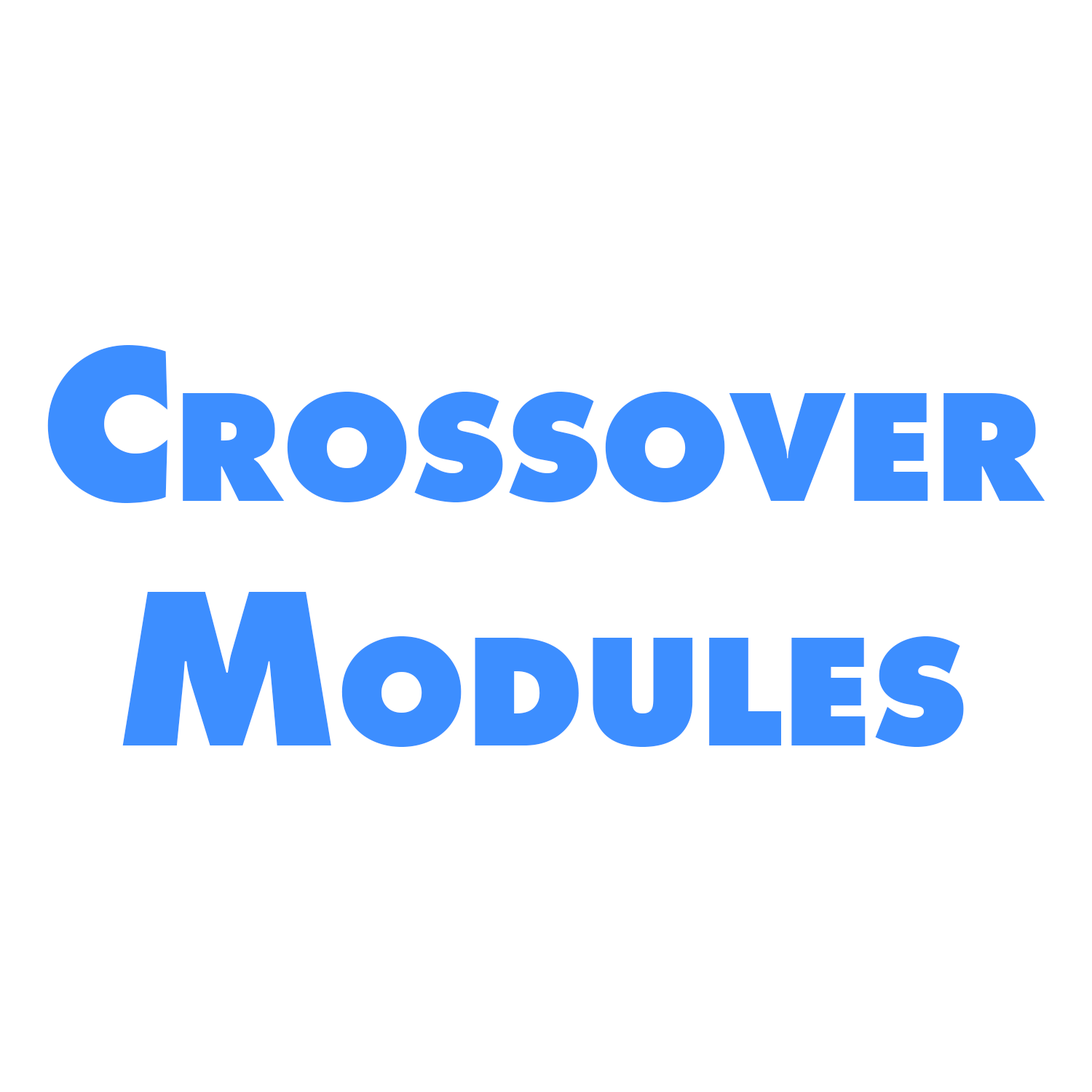
<style>
.page{position:relative;width:1092px;height:1092px;background:#ffffff}
.page>*{position:absolute;margin:0}
.t1{font:203.8px "Futura-ExtraBold";color:#3d8eff;font-variant:small-caps}
</style>
<div class="page">
<p class="t1" style="left:47px;top:345px;width:998px;height:402px;text-align:center">Crossover<br>Modules</p>
</div>
